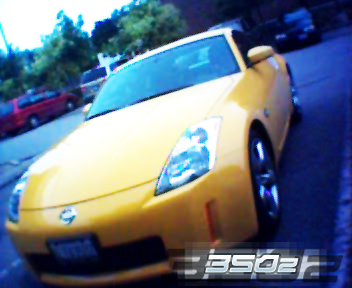
<style>
.page{position:relative;width:352px;height:288px}
.page>*{position:absolute;margin:0}
.t1{font:30px "DominatorMediumItalic"}
.t2{font:24px "DominatorMediumItalic"}
</style>
<div class="page">
<p class="t1" style="left:205px;top:255px;width:94px;height:18px">350<span class="t2">z</span></p>
</div>
